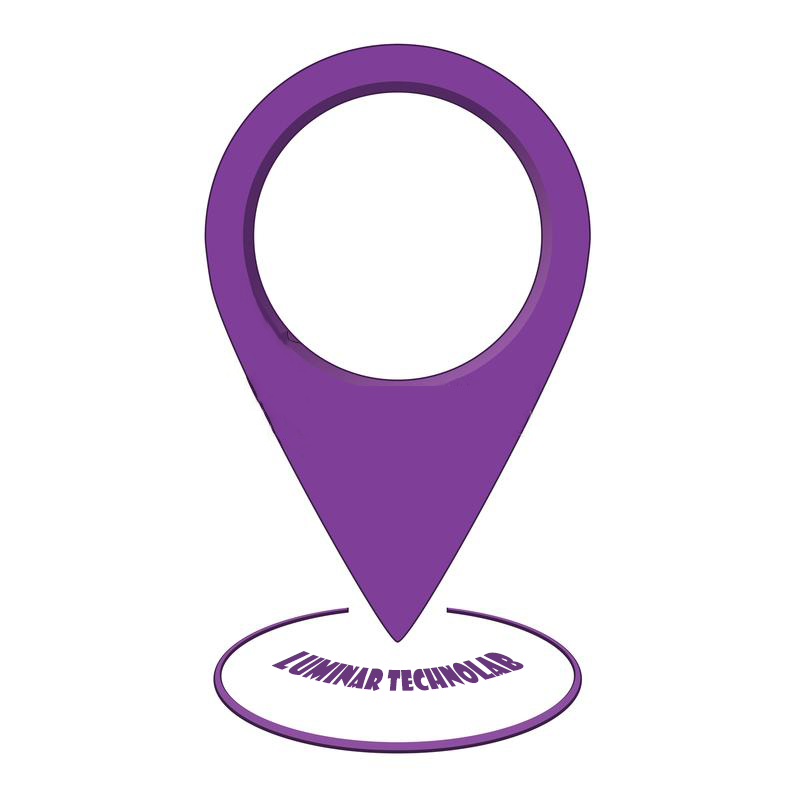
<style>
.page{position:relative;width:800px;height:800px;background:#ffffff}
.page>*{position:absolute;margin:0}
.t1{font:21.1px "ShowcardGothic-Reg";color:#69377c}
</style>
<div class="page">
<p class="t1" style="left:271px;top:651px;width:253px;height:40px;text-align:center">luminar technolab</p>
</div>
